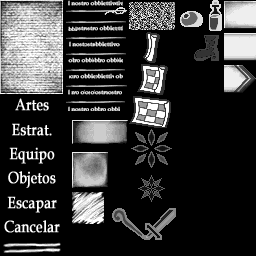
<style>
.page{position:relative;width:256px;height:256px;background:#000000}
.page>*{position:absolute;margin:0}
.t1{font:16.2px/24.3px "BookAntiqua";color:#ffffff;font-weight:bold;scale:0.83 1}
</style>
<div class="page">
<p class="t1" style="left:4px;top:98px;width:56px;height:135px;text-align:center">Artes<br>Estrat.<br>Equipo<br>Objetos<br>Escapar<br>Cancelar</p>
</div>
